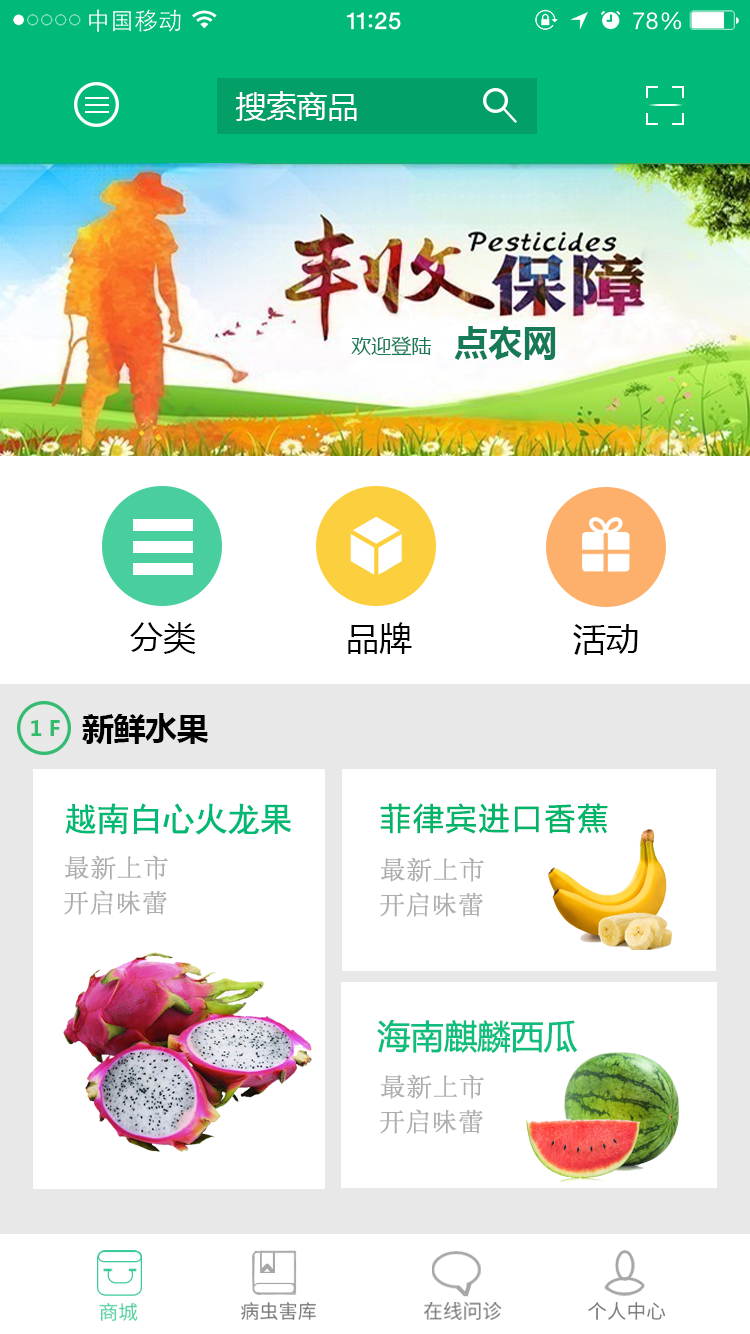
<style>
.page{position:relative;width:750px;height:1334px;background:#ffffff}
.page>*{position:absolute;margin:0}
.t1{font:30.5px "MicrosoftYaHei";color:#ffffff}
.t2{font:34.8px "MicrosoftYaHei-Bold";color:#177a56}
.t3{font:20px "MicrosoftYaHei";color:#177a56}
.t4{font:33.3px "MicrosoftYaHei";color:#010101}
.t5{font:31.4px "MicrosoftYaHei-Bold";color:#000000}
.t6{font:20.9px "MicrosoftYaHei-Bold";color:#34bb6f}
.t7{font:33.3px "SimHei";letter-spacing:-0.05em;color:#00b974;font-weight:bold}
.t8{font:30.6px "MicrosoftYaHei";letter-spacing:0.05em;color:#00b469;font-weight:bold}
.t9{font:25px "STSong";letter-spacing:0.025em;color:#aeaeae;font-weight:bold}
.t10{font:33.3px "MicrosoftYaHei";letter-spacing:-0.025em;color:#0fbd7c;font-weight:bold}
.t11{font:19.3px "SourceHanSansSC-Regular";color:#787878}
.t12{font:19.7px "SourceHanSansSC-Regular";color:#787878}
.t13{font:19.5px "SourceHanSansSC-Regular";color:#787878}
.t14{font:19.6px "SourceHanSansSC-Regular";color:#4ad09e}
</style>
<div class="page">
<p class="t1" style="left:236px;top:91px;width:121px;height:30px">搜索商品</p>
<p class="t2" style="left:454px;top:326px;width:102px;height:34px">点农网</p>
<p class="t3" style="left:351px;top:336px;width:81px;height:20px">欢迎登陆</p>
<p class="t4" style="left:130px;top:622px;width:66px;height:32px">分类</p>
<p class="t4" style="left:348px;top:622px;width:64px;height:32px">品牌</p>
<p class="t4" style="left:573px;top:624px;width:65px;height:31px">活动</p>
<p class="t5" style="left:82px;top:713px;width:127px;height:31px">新鲜水果</p>
<p class="t6" style="left:31px;top:719px;width:29px;height:17px">1 F</p>
<p class="t7" style="left:65px;top:803px;width:226px;height:32px">越南白心火龙果</p>
<p class="t8" style="left:380px;top:803px;width:228px;height:31px">菲律宾进口香蕉</p>
<p class="t9" style="left:65px;top:855px;width:103px;height:25px">最新上市</p>
<p class="t9" style="left:381px;top:857px;width:103px;height:25px">最新上市</p>
<p class="t9" style="left:64px;top:890px;width:103px;height:25px">开启味蕾</p>
<p class="t9" style="left:380px;top:892px;width:103px;height:25px">开启味蕾</p>
<p class="t10" style="left:377px;top:1020px;width:201px;height:33px">海南麒麟西瓜</p>
<p class="t9" style="left:381px;top:1074px;width:103px;height:25px">最新上市</p>
<p class="t9" style="left:380px;top:1109px;width:103px;height:25px">开启味蕾</p>
<p class="t11" style="left:241px;top:1301px;width:75px;height:19px">病虫害库</p>
<p class="t12" style="left:424px;top:1302px;width:78px;height:18px">在线问诊</p>
<p class="t13" style="left:588px;top:1302px;width:77px;height:18px">个人中心</p>
<p class="t14" style="left:99px;top:1303px;width:39px;height:18px">商城</p>
</div>
